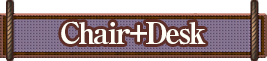
<style>
.page{position:relative;width:267px;height:61px;background:#ffffff}
.page>*{position:absolute;margin:0}
.t1{font:30px "RyuminPro-ExBold";letter-spacing:-0.08em;color:#fffff7}
</style>
<div class="page">
<p class="t1" style="left:61px;top:21px;width:145px;height:24px">Chair+Desk</p>
</div>
